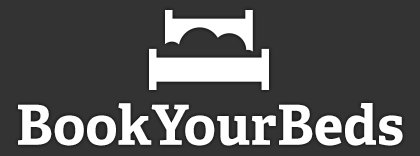
<style>
.page{position:relative;width:420px;height:156px;background:#333333}
.page>*{position:absolute;margin:0}
.t1{font:55.3px "AdelleBasic-Bold";color:#ffffff}
</style>
<div class="page">
<p class="t1" style="left:18px;top:103px;width:385px;height:43px">BookYourBeds</p>
</div>
